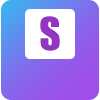
<style>
.page{position:relative;width:100px;height:100px;background:#ffffff}
.page>*{position:absolute;margin:0}
.t1{font:41.7px "Impact";color:#9235c2}
</style>
<div class="page">
<p class="t1" style="left:40px;top:16px;width:20px;height:35px">S</p>
</div>
